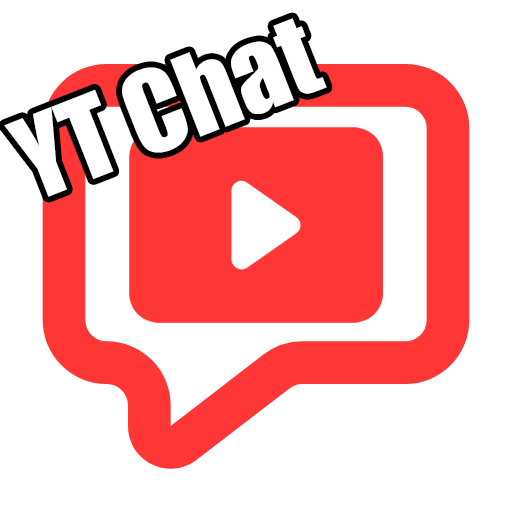
<style>
.page{position:relative;width:512px;height:512px;background:#ffffff}
.page>*{position:absolute;margin:0}
.t1{font:104.5px "Impact";color:#ffffff}
</style>
<div class="page">
<p class="t1" style="left:4px;top:18px;width:323px;height:179px;rotate:-21deg">YT Chat</p>
</div>
